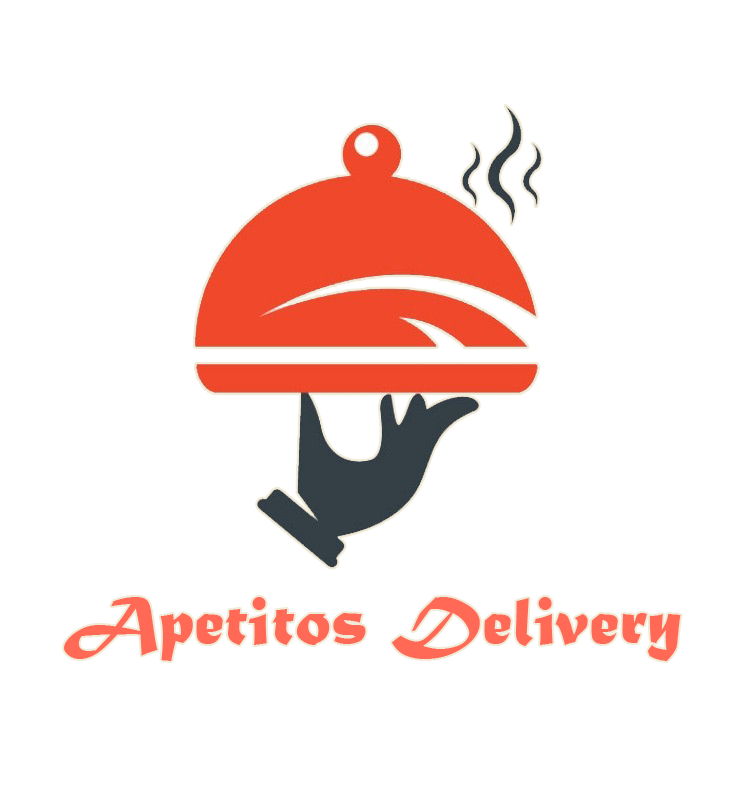
<style>
.page{position:relative;width:745px;height:800px;background:#ffffff}
.page>*{position:absolute;margin:0}
.t1{font:72px "MaturaMTScriptCapitals";color:#ff6955}
</style>
<div class="page">
<p class="t1" style="left:64px;top:597px;width:617px;height:64px">Apetitos Delivery</p>
</div>
